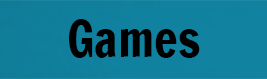
<style>
.page{position:relative;width:267px;height:79px}
.page>*{position:absolute;margin:0}
.t1{font:50px "FrancoisOne-Regular";color:#000000}
</style>
<div class="page">
<p class="t1" style="left:69px;top:19px;width:131px;height:39px">Games</p>
</div>
